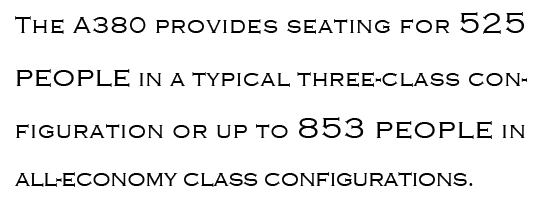
<style>
.page{position:relative;width:540px;height:211px;background:#ffffff}
.page>*{position:absolute;margin:0}
.t1{font:24px "CopperplateGothic-Light";color:#000000}
.t2{font:30px "CopperplateGothic-Light";color:#000000}
</style>
<div class="page">
<p class="t1" style="left:15px;top:12px;width:512px;height:175px;text-align:justify">The A380 provides seating for <span class="t2">525 people</span> in a typical three-class configuration or up to <span class="t2">853 people</span> in all-economy class configurations.</p>
</div>
